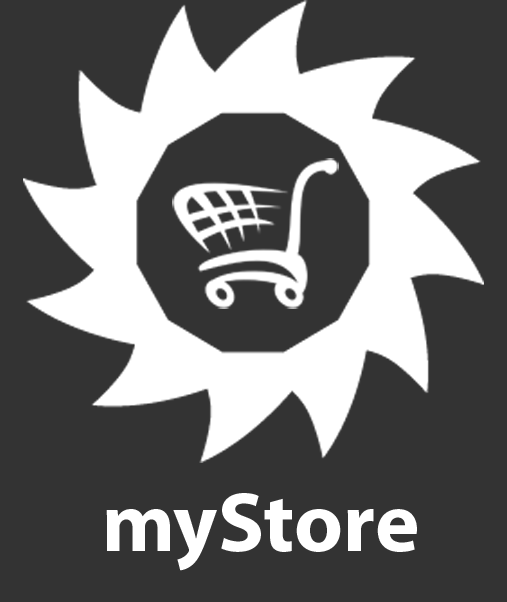
<style>
.page{position:relative;width:507px;height:602px;background:#333333}
.page>*{position:absolute;margin:0}
.t1{font:85px "MyriadPro-Bold";color:#ffffff}
</style>
<div class="page">
<p class="t1" style="left:106px;top:493px;width:311px;height:78px">myStore</p>
</div>
